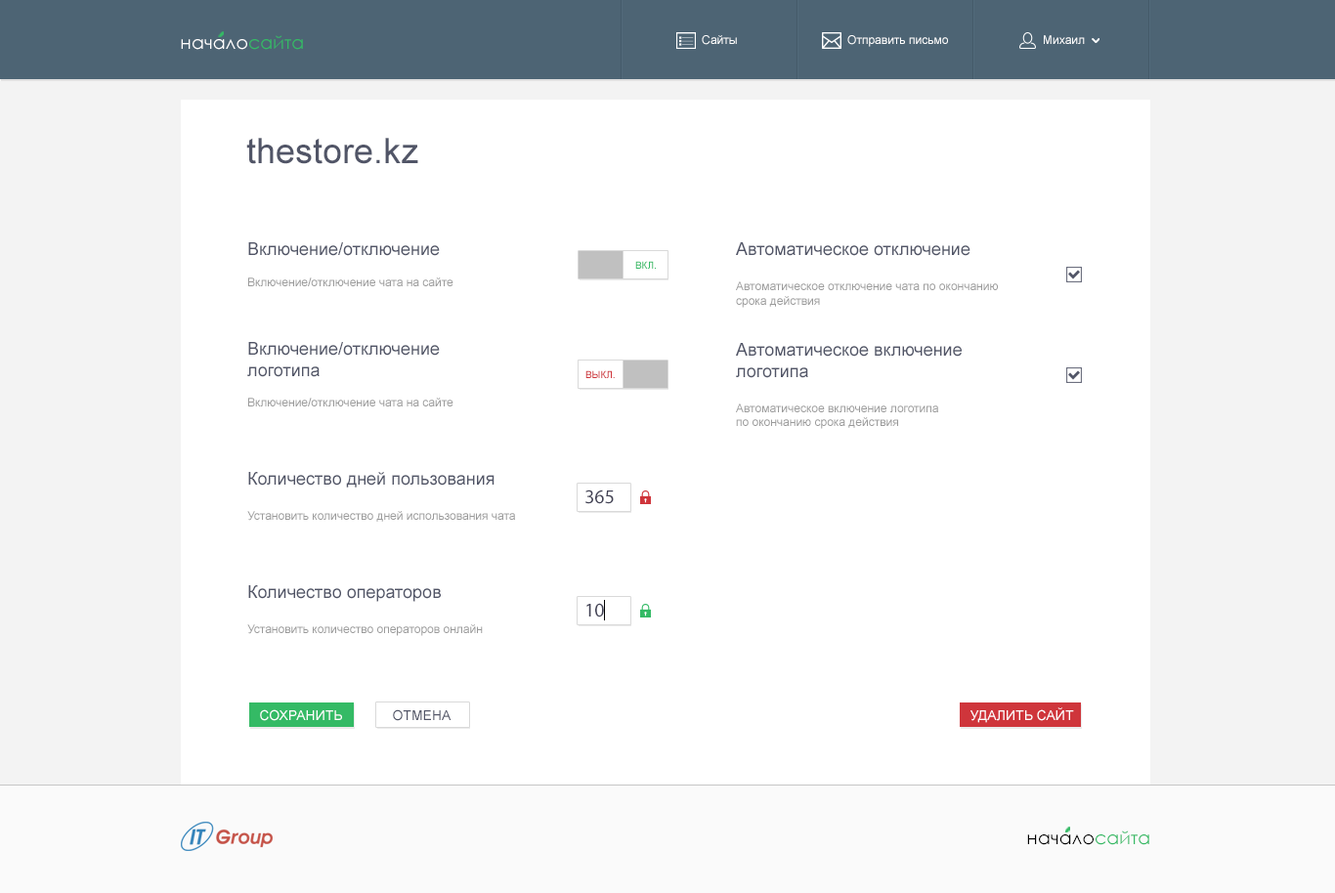
<style>
.page{position:relative;width:1335px;height:893px;background:#ffffff}
.page>*{position:absolute;margin:0}
.t1{font:18.1px "CenturyGothic";color:#ffffff}
.t2{font:18.1px "CenturyGothic";color:#34ba65}
.t3{font:11.7px "ArialMT";color:#ffffff}
.t4{font:35.2px "ArialMT";color:#515567}
.t5{font:11.7px "ArialMT";color:#9a9a9a}
.t6{font:17.6px "ArialMT";color:#515567}
.t7{font:9.8px "ArialMT";color:#34ba65}
.t8{font:9.8px "ArialMT";color:#cf353b}
.t9{font:19.5px "MyriadPro-Regular";color:#424255}
.t10{font:13.7px "ArialMT";color:#ffffff}
.t11{font:13.7px "ArialMT";color:#515567}
.t12{font:18.1px "CenturyGothic";color:#000000}
</style>
<div class="page">
<p class="t1" style="left:181px;top:35px;width:122px;height:15px">начало<span class="t2">сайта</span></p>
<p class="t3" style="left:702px;top:35px;width:35px;height:10px">Сайты</p>
<p class="t3" style="left:847px;top:35px;width:101px;height:12px">Отправить письмо</p>
<p class="t3" style="left:1044px;top:35px;width:41px;height:9px">Михаил</p>
<p class="t4" style="left:246px;top:138px;width:172px;height:26px">thestore.kz</p>
<p class="t5" style="left:248px;top:242px;width:205px;height:44px"><span class="t6">Включение/отключение<br><br></span>Включение/отключение чата на сайте</p>
<p class="t5" style="left:736px;top:242px;width:262px;height:66px"><span class="t6">Автоматическое отключение <br><br></span>Автоматическое отключение чата по окончанию <br>срока действия</p>
<p class="t7" style="left:635px;top:261px;width:21px;height:8px">ВКЛ.</p>
<p class="t5" style="left:247px;top:342px;width:206px;height:65px"><span class="t6">Включение/отключение <br>логотипа<br><br></span>Включение/отключение чата на сайте</p>
<p class="t5" style="left:736px;top:343px;width:226px;height:86px"><span class="t6">Автоматическое включение<br>логотипа <br><br></span>Автоматическое включение логотипа <br>по окончанию срока действия</p>
<p class="t8" style="left:585px;top:370px;width:30px;height:8px">ВЫКЛ.</p>
<p class="t5" style="left:247px;top:472px;width:268px;height:50px"><span class="t6">Количество дней пользования<br><br></span>Установить количество дней использования чата</p>
<p class="t9" style="left:585px;top:490px;width:29px;height:14px">365</p>
<p class="t5" style="left:247px;top:585px;width:236px;height:51px"><span class="t6">Количество операторов<br><br></span>Установить количество операторов онлайн</p>
<p class="t9" style="left:586px;top:603px;width:18px;height:15px">10</p>
<p class="t10" style="left:260px;top:710px;width:82px;height:11px">СОХРАНИТЬ</p>
<p class="t11" style="left:393px;top:710px;width:59px;height:11px">ОТМЕНА</p>
<p class="t10" style="left:970px;top:708px;width:104px;height:15px">УДАЛИТЬ САЙТ</p>
<p class="t12" style="left:1027px;top:831px;width:122px;height:14px">начало<span class="t2">сайта</span></p>
</div>
